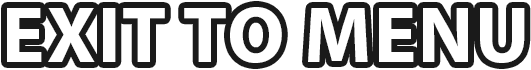
<style>
.page{position:relative;width:531px;height:70px;background:#ffffff}
.page>*{position:absolute;margin:0}
.t1{font:79.9px "MyriadPro-Bold";letter-spacing:0.025em;color:#ffffff}
</style>
<div class="page">
<p class="t1" style="left:7px;top:7px;width:518px;height:56px">EXIT TO MENU</p>
</div>
